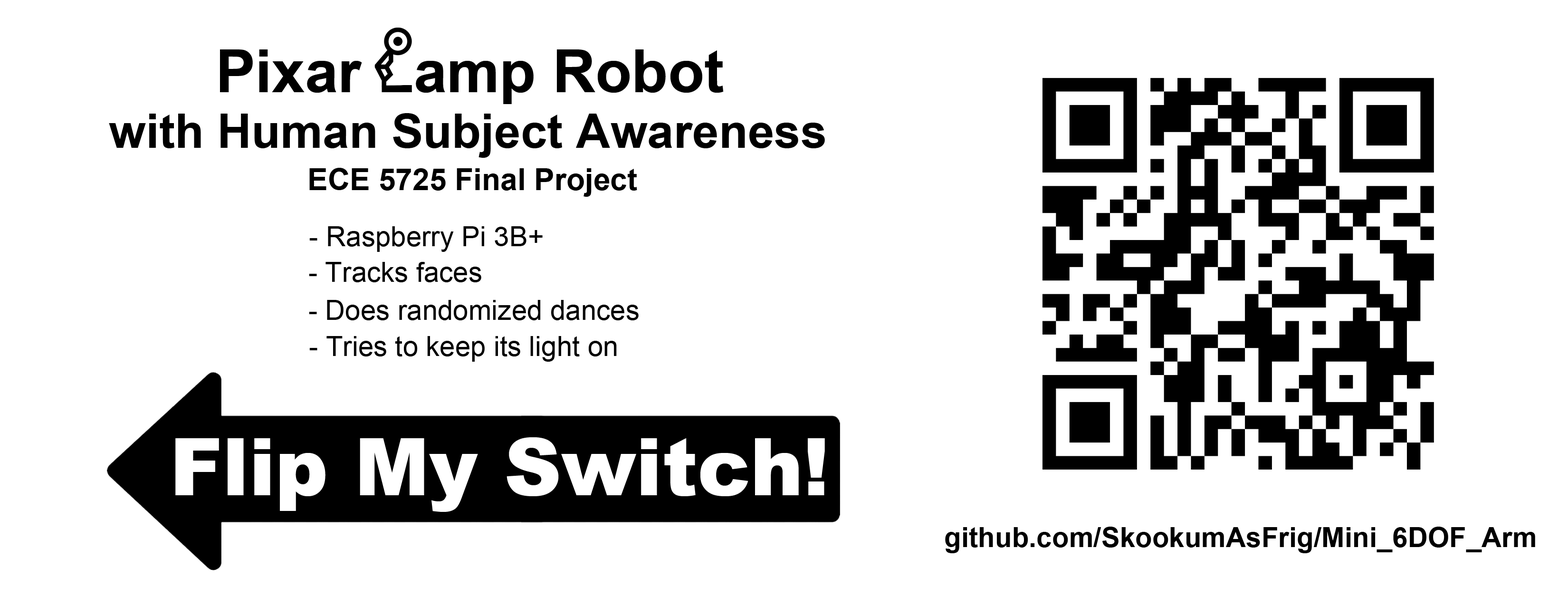
<style>
.page{position:relative;width:1568px;height:606px;background:#ffffff}
.page>*{position:absolute;margin:0}
.t1{font:47.5px "Arial-BoldMT";color:#000000}
.t2{font:30.4px "Arial-BoldMT";color:#000000}
.t3{font:27.7px "ArialMT";color:#000000}
.t4{font:79.2px "Arial-Black";color:#ffffff}
.t5{font:27.7px "Arial-BoldMT";color:#000000}
</style>
<div class="page">
<p class="t1" style="left:109px;top:113px;width:716px;height:45px">with Human Subject Awareness</p>
<p class="t2" style="left:309px;top:168px;width:328px;height:29px">ECE 5725 Final Project</p>
<p class="t3" style="left:309px;top:226px;width:234px;height:26px">- Raspberry Pi 3B+</p>
<p class="t3" style="left:309px;top:262px;width:172px;height:20px">- Tracks faces</p>
<p class="t3" style="left:309px;top:300px;width:330px;height:20px">- Does randomized dances</p>
<p class="t3" style="left:309px;top:336px;width:308px;height:26px">- Tries to keep its light on</p>
<p class="t4" style="left:175px;top:437px;width:650px;height:75px">Flip My Switch!</p>
<p class="t5" style="left:945px;top:526px;width:590px;height:27px">github.com/SkookumAsFrig/Mini_6DOF_Arm</p>
</div>
